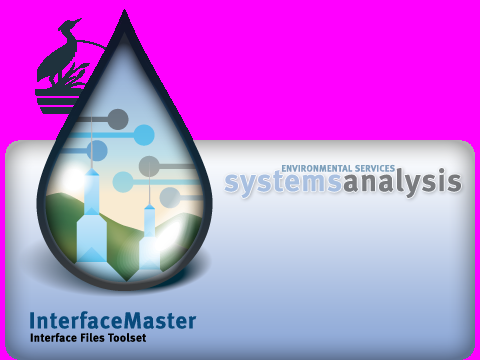
<style>
.page{position:relative;width:480px;height:360px;background:#ff00ff}
.page>*{position:absolute;margin:0}
.t1{font:31.2px "MetaBold-Roman";letter-spacing:0.04em}
.t2{font:9.1px "MetaBold-Roman";letter-spacing:0.04em;color:#7ea1bc}
.t3{font:22.9px "MetaBold-Roman";letter-spacing:0.04em;color:#084b7d}
.t4{font:11.5px "MetaBold-Roman";letter-spacing:0.04em;color:#000000}
</style>
<div class="page">
<p class="t1" style="left:224px;top:167px;width:237px;height:32px">systemsanalysis</p>
<p class="t2" style="left:282px;top:164px;width:113px;height:8px">ENVIRONMENTAL SERVICES</p>
<p class="t3" style="left:30px;top:311px;width:167px;height:18px">InterfaceMaster</p>
<p class="t4" style="left:30px;top:333px;width:116px;height:9px">Interface Files Toolset</p>
</div>
